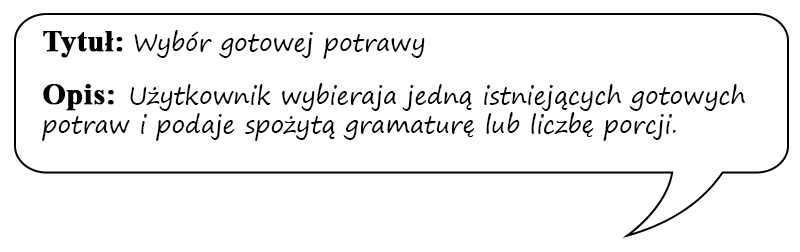
<style>
.page{position:relative;width:800px;height:252px;background:#ffffff}
.page>*{position:absolute;margin:0}
.t1{font:24px "SegoePrint";color:#000000}
.t2{font:30px "TimesNewRomanPS-BoldMT";color:#000000;font-weight:bold}
</style>
<div class="page">
<p class="t1" style="left:42px;top:30px;width:703px;height:111px"><span class="t2">Tytuł: </span>Wybór gotowej potrawy<br><br><span class="t2">Opis:  </span>Użytkownik wybieraja jedną istniejących gotowych potraw i podaje spożytą gramaturę lub liczbę porcji.</p>
</div>
